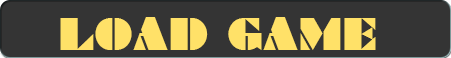
<style>
.page{position:relative;width:451px;height:58px;background:#343434}
.page>*{position:absolute;margin:0}
.t1{font:72.3px "Braggadocio";letter-spacing:0.01em;color:#ffe168;scale:0.9 1}
</style>
<div class="page">
<p class="t1" style="left:60px;top:17px;width:316px;height:33px">LOAD GAME</p>
</div>
